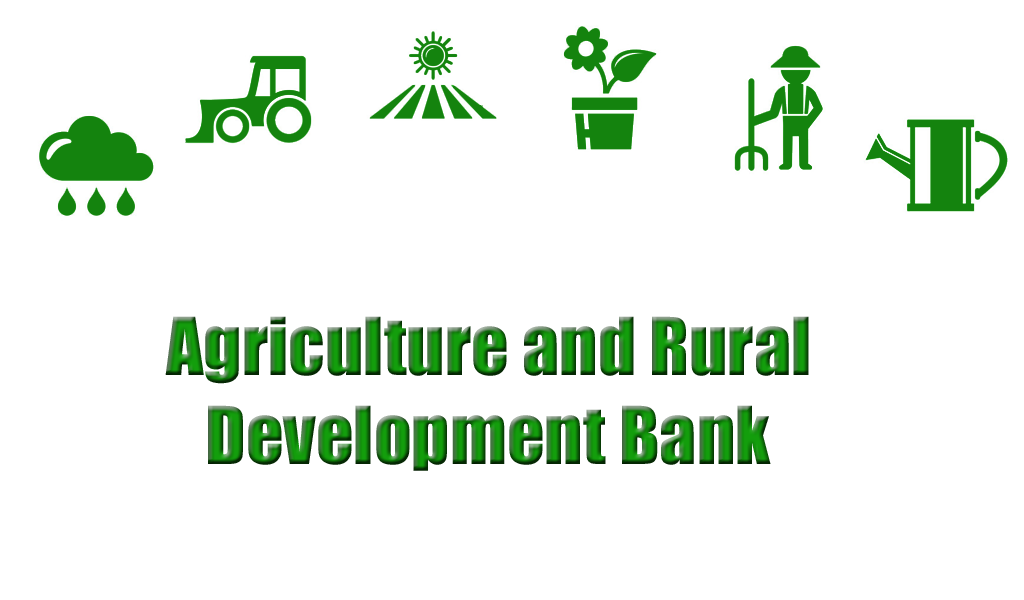
<style>
.page{position:relative;width:1024px;height:600px;background:#ffffff}
.page>*{position:absolute;margin:0}
.t1{font:73.8px "Impact"}
</style>
<div class="page">
<p class="t1" style="left:165px;top:316px;width:644px;height:155px">Agriculture and Rural <br>   Development Bank</p>
</div>
